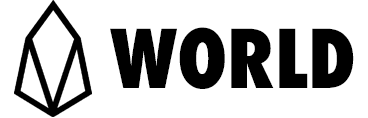
<style>
.page{position:relative;width:368px;height:118px;background:#ffffff}
.page>*{position:absolute;margin:0}
.t1{font:78.7px "Futura-CondensedExtraBold";color:#000000}
</style>
<div class="page">
<p class="t1" style="left:110px;top:27px;width:244px;height:62px">WORLD</p>
</div>
